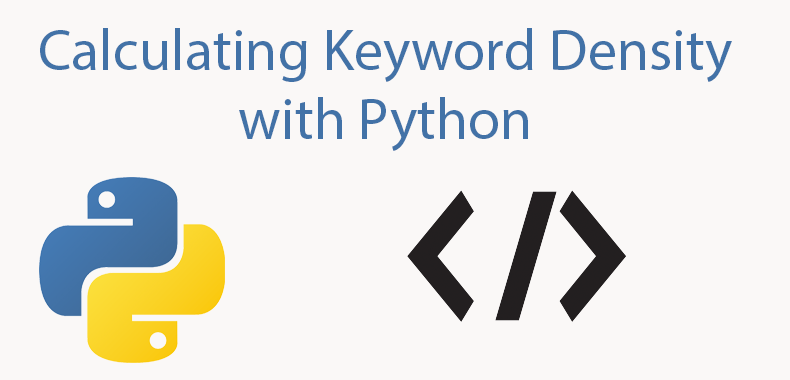
<style>
.page{position:relative;width:790px;height:380px;background:#faf8f7}
.page>*{position:absolute;margin:0}
.t1{font:58.1px "MyriadPro-Regular";color:#4272a7}
</style>
<div class="page">
<p class="t1" style="left:40px;top:28px;width:692px;height:123px;text-align:center">Calculating Keyword Density with Python</p>
</div>
